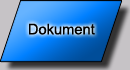
<style>
.page{position:relative;width:130px;height:70px}
.page>*{position:absolute;margin:0}
.t1{font:14.7px "ArialMT";color:#000000}
</style>
<div class="page">
<p class="t1" style="left:29px;top:23px;width:66px;height:12px">Dokument</p>
</div>
